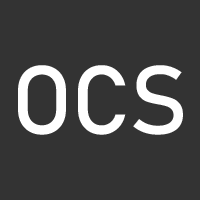
<style>
.page{position:relative;width:200px;height:200px;background:#333333}
.page>*{position:absolute;margin:0}
.t1{font:96px "Bahnschrift";color:#ffffff}
</style>
<div class="page">
<p class="t1" style="left:18px;top:65px;width:165px;height:70px">OCS</p>
</div>
